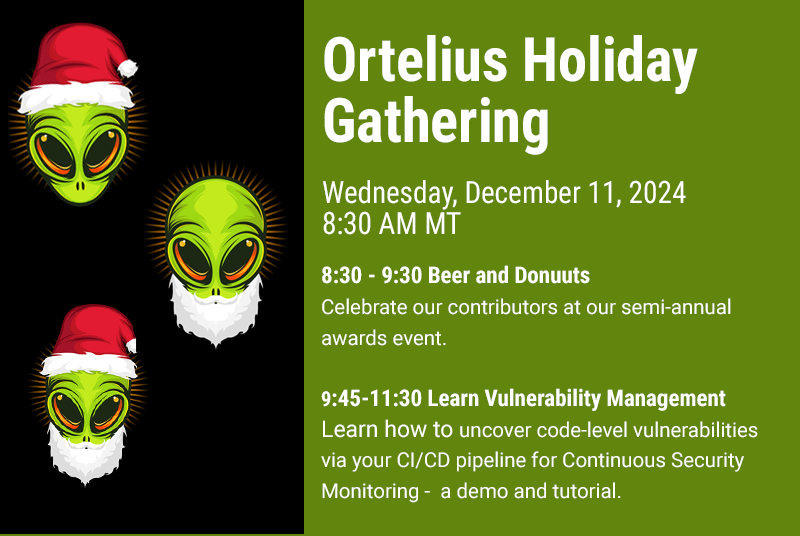
<style>
.page{position:relative;width:800px;height:536px;background:#62850e}
.page>*{position:absolute;margin:0}
.t1{font:30.7px/30.7px "RobotoCondensed-Regular";color:#ffffff;scale:0.95 1}
.t2{font:61.3px/61.3px "RobotoCondensed-Bold";color:#ffffff;scale:0.95 1}
.t3{font:20.4px/30.7px "Roboto-Regular";color:#ffffff}
.t4{font:23px/30.7px "RobotoCondensed-Bold";color:#ffffff}
.t5{font:20.4px/30.7px "RobotoCondensed-Bold";color:#ffffff}
.t6{font:23px/30.7px "Roboto-Regular";color:#ffffff}
</style>
<div class="page">
<p class="t1" style="left:323px;top:35px;width:375px;height:200px"><span class="t2">Ortelius Holiday<br>Gathering<br><br></span>Wednesday, December 11, 2024<br>8:30 AM MT</p>
<p class="t3" style="left:321px;top:265px;width:437px;height:238px"><span class="t4">8:30 - 9:30 Beer and Donuuts<br></span>Celebrate our contributors at our semi-annual awards event.<span class="t5"> <br><br>9</span><span class="t4">:45-11:30 Learn Vulnerability Management <br></span><span class="t6">Learn how to </span>uncover code-level vulnerabilities via your CI/CD pipeline for Continuous Security Monitoring -  a demo and tutorial.</p>
</div>
